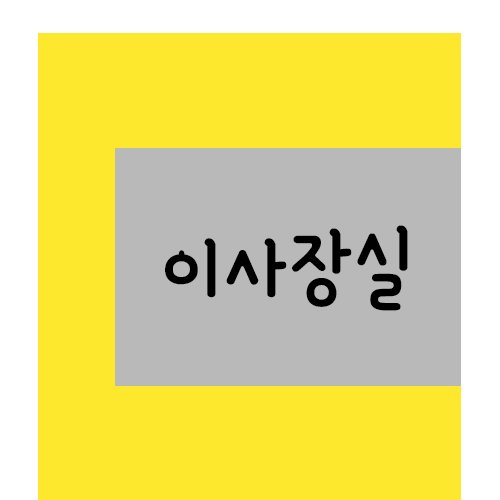
<style>
.page{position:relative;width:500px;height:500px;background:#fee82d}
.page>*{position:absolute;margin:0}
.t1{font:100px "YanoljaYacheR";color:#000000}
</style>
<div class="page">
<p class="t1" style="left:165px;top:225px;width:243px;height:86px">이사장실</p>
</div>
